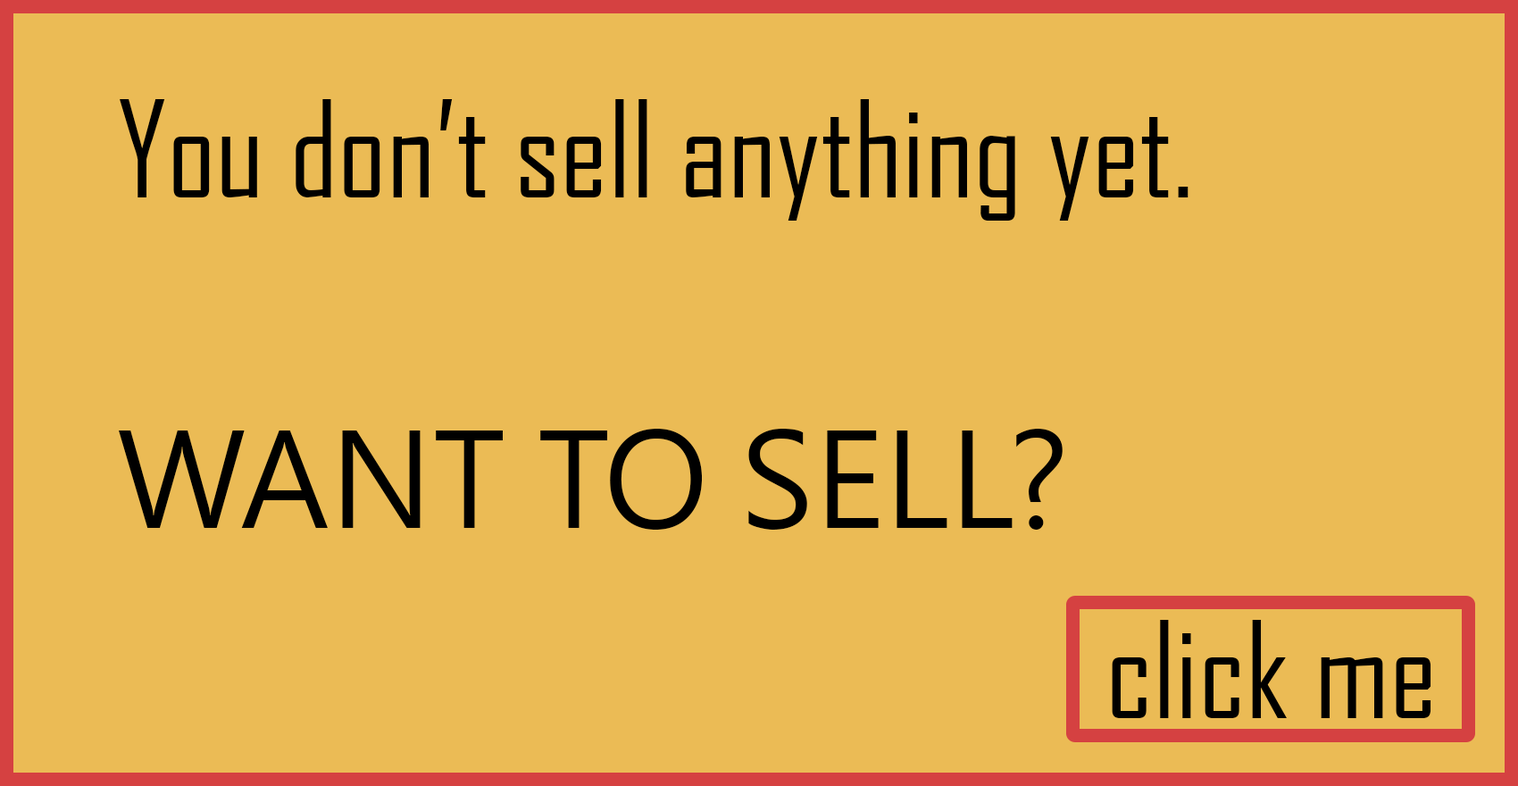
<style>
.page{position:relative;width:1518px;height:786px;background:#ebbb55}
.page>*{position:absolute;margin:0}
.t1{font:128.6px "AgencyFB-Reg";color:#000000}
.t2{font:128.6px "MicrosoftJhengHeiRegular";color:#000000}
</style>
<div class="page">
<p class="t1" style="left:120px;top:99px;width:1068px;height:122px">You don’t sell anything yet.</p>
<p class="t2" style="left:119px;top:429px;width:943px;height:100px">WANT TO SELL?</p>
<p class="t1" style="left:1112px;top:620px;width:319px;height:98px">click me</p>
</div>
